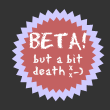
<style>
.page{position:relative;width:110px;height:110px;background:#333333}
.page>*{position:absolute;margin:0}
.t1{font:24px "EraserDust";letter-spacing:-0.025em;color:#ffffff}
.t2{font:13px/12px "EraserDust";letter-spacing:0.05em;color:#fbfbfb}
.t3{font:11px/12px "EraserDust";letter-spacing:0.05em;color:#fbfbfb}
.t4{font:9px "EraserDust";letter-spacing:-0.025em;color:#ffffff}
.t5{font:8px "EraserDust";letter-spacing:-0.025em;color:#ffffff}
</style>
<div class="page">
<p class="t1" style="left:29px;top:32px;width:58px;height:19px">BETA!</p>
<p class="t2" style="left:33px;top:54px;width:51px;height:22px;text-align:center">but a bit<br>death  <span class="t3">-)</span></p>
<p class="t4" style="left:69px;top:65px;width:4px;height:6px">x</p>
<p class="t5" style="left:69px;top:73px;width:4px;height:5px">x</p>
</div>
